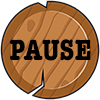
<style>
.page{position:relative;width:100px;height:100px;background:#ffffff}
.page>*{position:absolute;margin:0}
.t1{font:30.3px "AmericanTypewriter-CondensedBold";color:#000000}
</style>
<div class="page">
<p class="t1" style="left:10px;top:39px;width:81px;height:22px">PAUSE</p>
</div>
